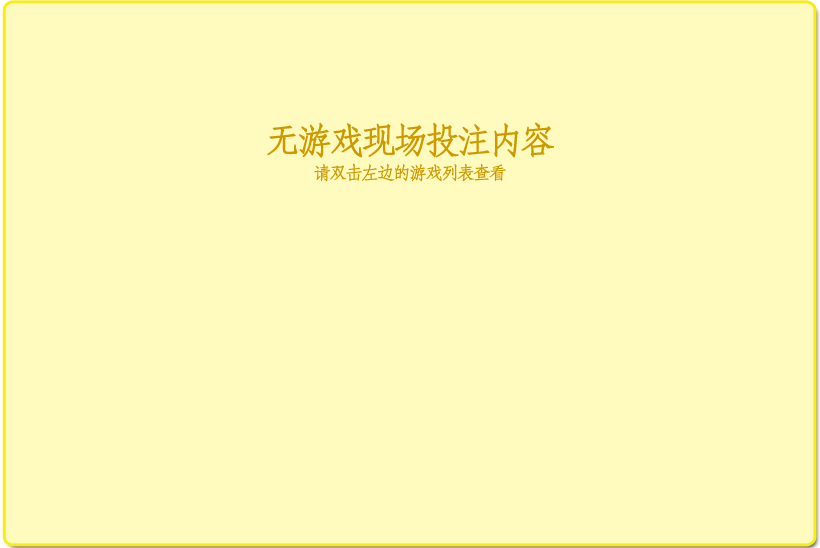
<style>
.page{position:relative;width:820px;height:548px;background:#fffbbf}
.page>*{position:absolute;margin:0}
.t1{font:36px "STFangsong";letter-spacing:-0.14em;color:#cc9900;font-weight:bold}
.t2{font:18px "STFangsong";letter-spacing:-0.14em;color:#cc9900;font-weight:bold}
</style>
<div class="page">
<p class="t1" style="left:267px;top:122px;width:287px;height:36px">无游戏现场投注内容</p>
<p class="t2" style="left:314px;top:163px;width:192px;height:19px">请双击左边的游戏列表查看</p>
</div>
